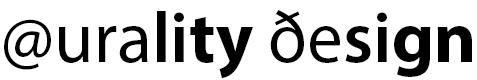
<style>
.page{position:relative;width:477px;height:80px;background:#ffffff}
.page>*{position:absolute;margin:0}
.t1{font:72px "MyriadPro-Regular";color:#000000}
.t2{font:72px "MyriadPro-Semibold";color:#000000}
.t3{font:72px "MyriadPro-Bold";color:#000000}
</style>
<div class="page">
<p class="t1" style="left:4px;top:10px;width:468px;height:69px">@ura<span class="t2">li</span><span class="t3">ty </span>ðe<span class="t2">si</span><span class="t3">gn</span></p>
</div>
